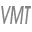
<style>
.page{position:relative;width:32px;height:32px;background:#ffffff}
.page>*{position:absolute;margin:0}
.t1{font:24.2px "ITCAvantGardePro-MdObl";letter-spacing:0.005em;color:#828282;scale:0.61 1}
</style>
<div class="page">
<p class="t1" style="left:1px;top:6px;width:30px;height:18px">VMT</p>
</div>
